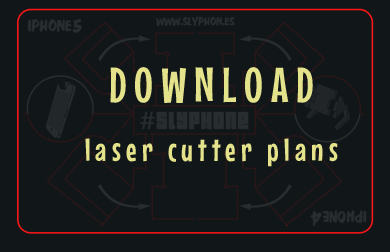
<style>
.page{position:relative;width:390px;height:252px;background:#111618}
.page>*{position:absolute;margin:0}
.t1{font:32.3px/59px "MouseMemoirs-Regular";letter-spacing:0.16em;color:#e4e38b}
.t2{font:49px/59px "MouseMemoirs-Regular";letter-spacing:0.16em;color:#e4e38b}
</style>
<div class="page">
<p class="t1" style="left:85px;top:67px;width:253px;height:100px;text-align:center"><span class="t2">DOWNLOAD<br></span>laser cutter plans</p>
</div>
